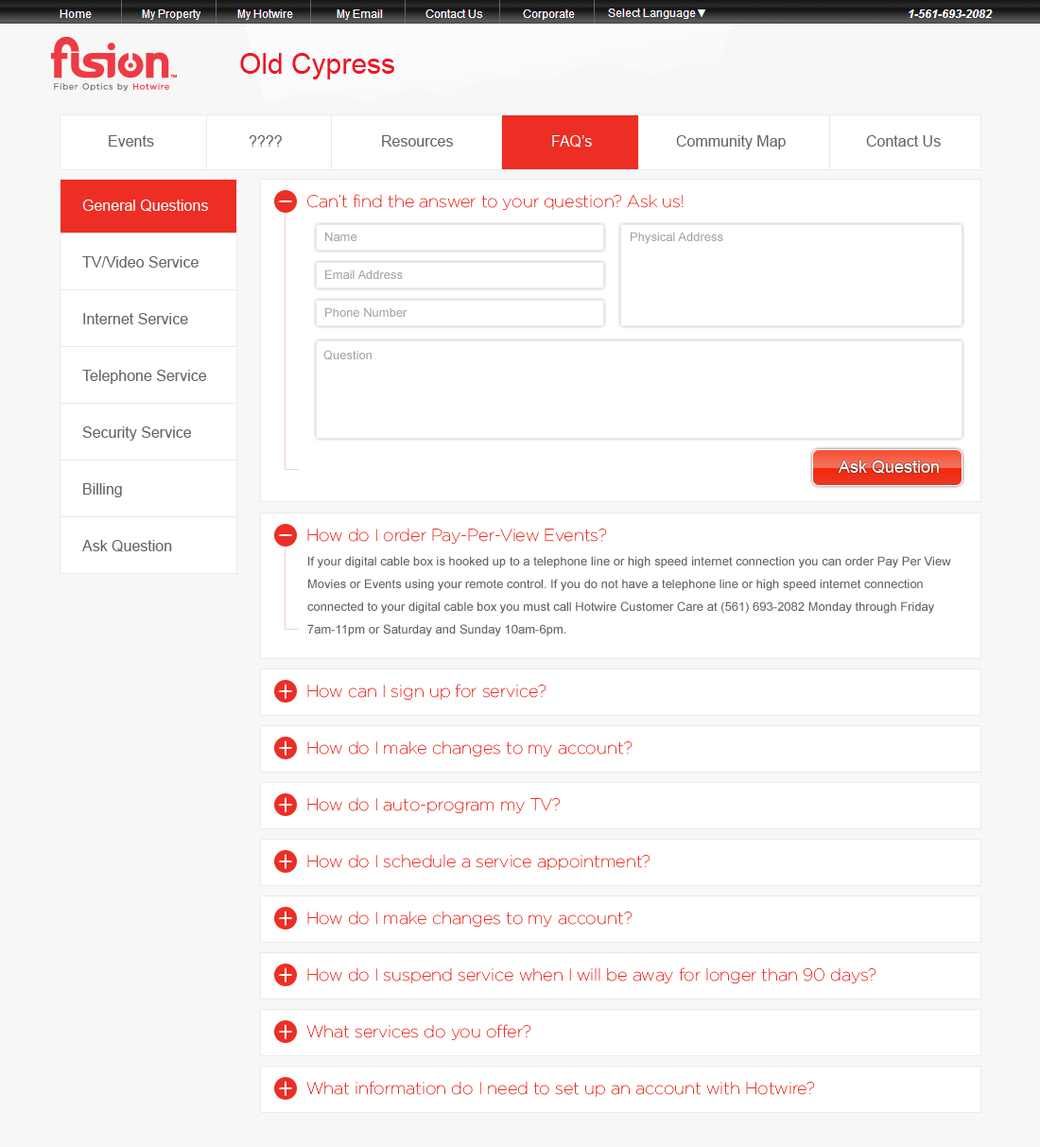
<style>
.page{position:relative;width:1040px;height:1147px;background:#ffffff}
.page>*{position:absolute;margin:0}
.t1{font:28.4px "ArialMT";color:#ed1625}
.t2{font:15.1px "ArialMT";color:#656665}
.t3{font:15.1px "ArialMT";color:#ffffff}
.t4{font:17px "Gotham-Thin";color:#ed2e24}
.t5{font:12.3px "ArialMT";color:#a4a4a4}
.t6{font:17px "ArialMT";color:#ffffff}
.t7{font:12.3px/22.7px "ArialMT";color:#636363}
</style>
<div class="page">
<p class="t1" style="left:240px;top:53px;width:154px;height:26px">Old Cypress</p>
<p class="t2" style="left:109px;top:135px;width:45px;height:12px">Events</p>
<p class="t2" style="left:109px;top:135px;width:45px;height:12px">Events</p>
<p class="t2" style="left:249px;top:135px;width:33px;height:12px">????</p>
<p class="t2" style="left:382px;top:135px;width:71px;height:12px">Resources</p>
<p class="t2" style="left:382px;top:135px;width:71px;height:12px">Resources</p>
<p class="t3" style="left:552px;top:135px;width:40px;height:12px">FAQ’s</p>
<p class="t2" style="left:676px;top:135px;width:110px;height:14px">Community Map</p>
<p class="t2" style="left:866px;top:135px;width:75px;height:12px">Contact Us</p>
<p class="t4" style="left:307px;top:194px;width:376px;height:16px">Can’t find the answer to your question? Ask us!</p>
<p class="t3" style="left:82px;top:199px;width:126px;height:13px">General Questions</p>
<p class="t5" style="left:325px;top:232px;width:32px;height:9px">Name</p>
<p class="t5" style="left:631px;top:232px;width:92px;height:12px">Physical Address</p>
<p class="t2" style="left:82px;top:256px;width:117px;height:12px">TV/Video Service</p>
<p class="t5" style="left:325px;top:269px;width:78px;height:10px">Email Address</p>
<p class="t2" style="left:83px;top:313px;width:105px;height:11px">Internet Service</p>
<p class="t5" style="left:325px;top:307px;width:82px;height:10px">Phone Number</p>
<p class="t5" style="left:323px;top:350px;width:49px;height:10px">Question</p>
<p class="t2" style="left:82px;top:370px;width:125px;height:14px">Telephone Service</p>
<p class="t2" style="left:82px;top:426px;width:110px;height:15px">Security Service</p>
<p class="t6" style="left:838px;top:460px;width:101px;height:14px">Ask Question</p>
<p class="t2" style="left:83px;top:483px;width:39px;height:14px">Billing</p>
<p class="t4" style="left:307px;top:528px;width:300px;height:16px">How do I order Pay-Per-View Events?</p>
<p class="t2" style="left:82px;top:540px;width:90px;height:12px">Ask Question</p>
<p class="t7" style="left:307px;top:556px;width:644px;height:80px">If your digital cable box is hooked up to a telephone line or high speed internet connection you can order Pay Per View Movies or Events using your remote control. If you do not have a telephone line or high speed internet connection connected to your digital cable box you must call Hotwire Customer Care at (561) 693-2082 Monday through Friday 7am-11pm or Saturday and Sunday 10am-6pm.</p>
<p class="t4" style="left:307px;top:683px;width:239px;height:17px">How can I sign up for service?</p>
<p class="t4" style="left:307px;top:740px;width:325px;height:16px">How do I make changes to my account?</p>
<p class="t4" style="left:307px;top:797px;width:254px;height:16px">How do I auto-program my TV?</p>
<p class="t4" style="left:307px;top:854px;width:343px;height:16px">How do I schedule a service appointment?</p>
<p class="t4" style="left:307px;top:910px;width:325px;height:16px">How do I make changes to my account?</p>
<p class="t4" style="left:307px;top:967px;width:569px;height:16px">How do I suspend service when I will be away for longer than 90 days?</p>
<p class="t4" style="left:306px;top:1024px;width:225px;height:16px">What services do you offer?</p>
<p class="t4" style="left:306px;top:1081px;width:509px;height:16px">What information do I need to set up an account with Hotwire?</p>
</div>
